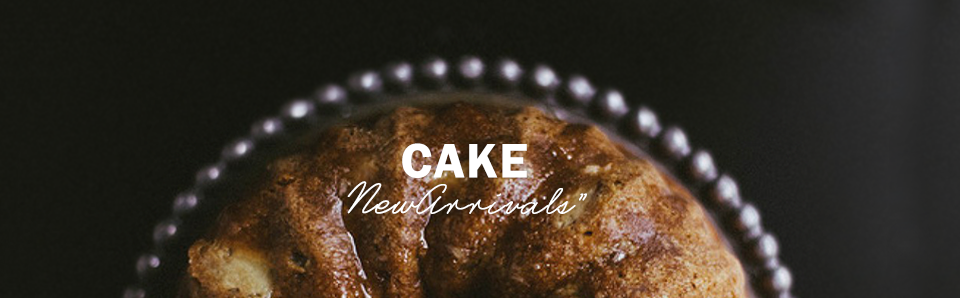
<style>
.page{position:relative;width:960px;height:298px}
.page>*{position:absolute;margin:0}
.t1{font:50.1px "FranklinGothic-Demi";color:#ffffff;text-transform:uppercase;font-weight:bold}
.t2{font:43.7px "CastroScriptPERSONALUSEONLY";color:#ffffff;font-weight:bold;scale:1.04 1}
.t3{font:43.8px "CastroScriptPERSONALUSEONLY";color:#ffffff;font-weight:bold;scale:1.03 1}
</style>
<div class="page">
<p class="t1" style="left:402px;top:143px;width:125px;height:35px">CAKE</p>
<p class="t2" style="left:347px;top:181px;width:73px;height:33px">New</p>
<p class="t3" style="left:416px;top:184px;width:171px;height:31px">Arrivals”</p>
</div>
